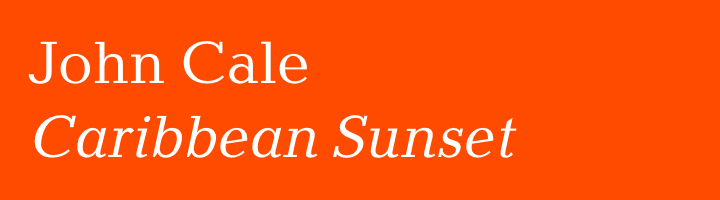
<style>
.page{position:relative;width:720px;height:200px;background:#ff4b00}
.page>*{position:absolute;margin:0}
.t1{font:61.6px "BalticaC-Italic";color:#ffffff}
.t2{font:61.6px "BalticaC";color:#ffffff}
</style>
<div class="page">
<p class="t1" style="left:28px;top:41px;width:489px;height:117px"><span class="t2">John Cale <br></span>Caribbean Sunset</p>
</div>
